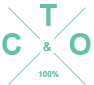
<style>
.page{position:relative;width:94px;height:85px;background:#ffffff}
.page>*{position:absolute;margin:0}
.t1{font:30px "Arial-BoldMT";color:#64c29e}
.t2{font:12px "Arial-BoldMT";color:#64c29e}
.t3{font:8px "Arial-BoldMT";color:#64c29e}
</style>
<div class="page">
<p class="t1" style="left:40px;top:4px;width:17px;height:22px">Т</p>
<p class="t1" style="left:69px;top:33px;width:22px;height:22px">О</p>
<p class="t2" style="left:43px;top:42px;width:9px;height:9px">&amp;</p>
<p class="t3" style="left:38px;top:71px;width:21px;height:6px">100%</p>
</div>
